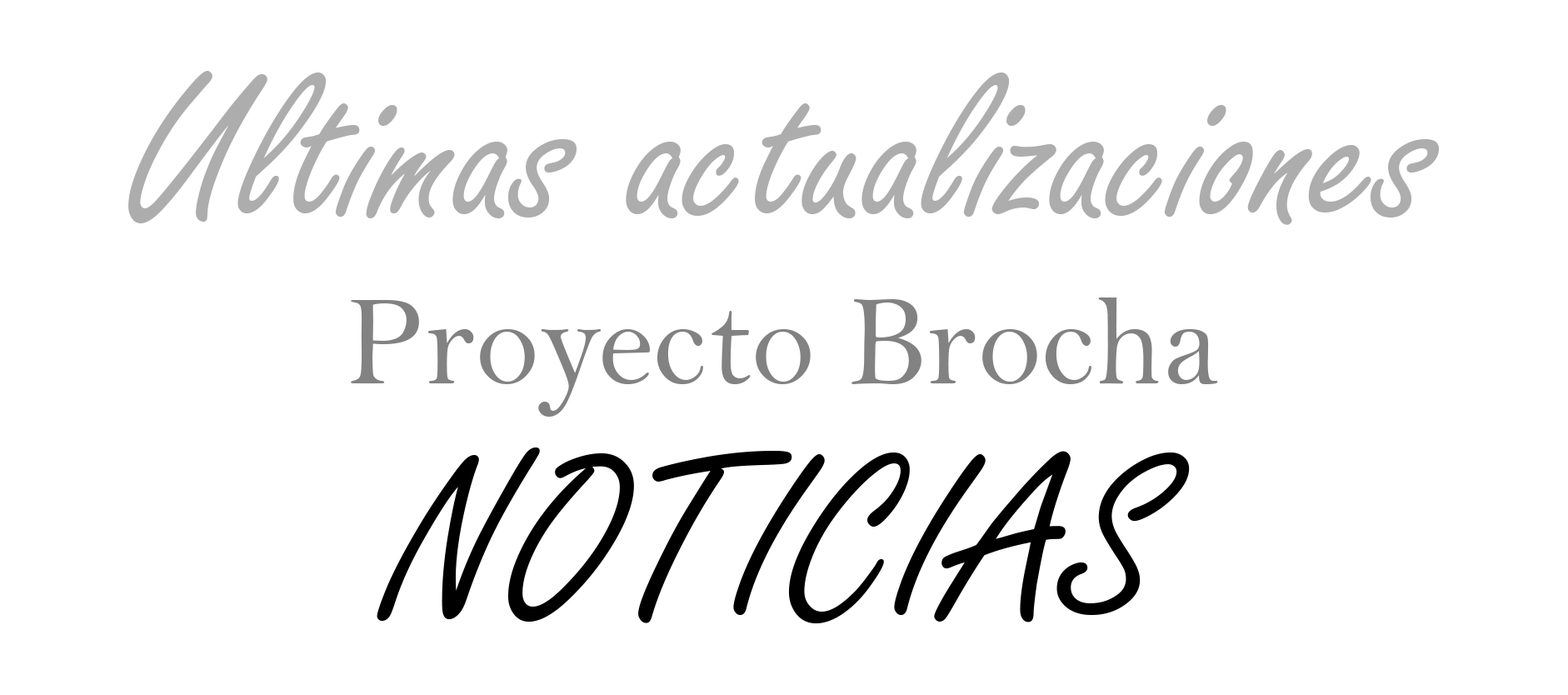
<style>
.page{position:relative;width:1568px;height:695px;background:#ffffff}
.page>*{position:absolute;margin:0}
.t1{font:227.5px "FreestyleScript-Regular";color:#adadad}
.t2{font:129.4px "BellMT";color:#828282}
.t3{font:250px "FreestyleScript-Regular";color:#000000}
</style>
<div class="page">
<p class="t1" style="left:128px;top:71px;width:1311px;height:154px">Ultimas actualizaciones</p>
<p class="t2" style="left:351px;top:297px;width:867px;height:120px">Proyecto Brocha</p>
<p class="t3" style="left:377px;top:447px;width:813px;height:176px">NOTICIAS</p>
</div>
